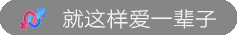
<style>
.page{position:relative;width:237px;height:35px;background:#868686}
.page>*{position:absolute;margin:0}
.t1{font:22.2px "HYQiHeiY1-CEW";color:#ffffff}
</style>
<div class="page">
<p class="t1" style="left:63px;top:9px;width:153px;height:20px">就这样爱一辈子</p>
</div>
